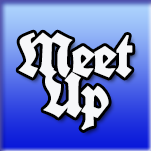
<style>
.page{position:relative;width:151px;height:151px}
.page>*{position:absolute;margin:0}
.t1{font:60px/40px "UnifrakturCook-Bold";letter-spacing:-0.05em;color:#f6f7f9;font-weight:bold}
</style>
<div class="page">
<p class="t1" style="left:18px;top:32px;width:115px;height:98px;text-align:center">Meet<br>Up</p>
</div>
